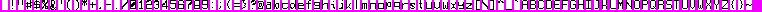
<style>
.page{position:relative;width:762px;height:12px;background:#f000ff}
.page>*{position:absolute;margin:0}
.t1{font:13px "VCROSDMono";color:#000000}
</style>
<div class="page">
<p class="t1" style="left:12px;top:0px;width:1px;height:9px">!</p>
<p class="t1" style="left:18px;top:0px;width:5px;height:5px">“</p>
<p class="t1" style="left:25px;top:0px;width:8px;height:9px">#</p>
<p class="t1" style="left:34px;top:0px;width:6px;height:9px">$</p>
<p class="t1" style="left:42px;top:0px;width:6px;height:9px">%</p>
<p class="t1" style="left:50px;top:0px;width:6px;height:10px">&amp;</p>
<p class="t1" style="left:67px;top:0px;width:3px;height:10px">(</p>
<p class="t1" style="left:76px;top:0px;width:3px;height:10px">)</p>
<p class="t1" style="left:82px;top:0px;width:5px;height:6px">*</p>
<p class="t1" style="left:89px;top:2px;width:7px;height:6px">+</p>
<p class="t1" style="left:122px;top:0px;width:6px;height:9px">/</p>
<p class="t1" style="left:130px;top:0px;width:6px;height:9px">0</p>
<p class="t1" style="left:139px;top:0px;width:4px;height:9px">1</p>
<p class="t1" style="left:146px;top:0px;width:6px;height:9px">2</p>
<p class="t1" style="left:154px;top:0px;width:5px;height:9px">3</p>
<p class="t1" style="left:162px;top:0px;width:6px;height:9px">4</p>
<p class="t1" style="left:170px;top:0px;width:6px;height:9px">5</p>
<p class="t1" style="left:178px;top:0px;width:6px;height:9px">6</p>
<p class="t1" style="left:186px;top:0px;width:6px;height:9px">7</p>
<p class="t1" style="left:194px;top:0px;width:6px;height:9px">8</p>
<p class="t1" style="left:202px;top:0px;width:6px;height:9px">9</p>
<p class="t1" style="left:212px;top:2px;width:1px;height:6px">:</p>
<p class="t1" style="left:219px;top:2px;width:2px;height:7px">;</p>
<p class="t1" style="left:227px;top:0px;width:3px;height:9px">&lt;</p>
<p class="t1" style="left:234px;top:3px;width:6px;height:4px">=</p>
<p class="t1" style="left:242px;top:0px;width:4px;height:9px">&gt;</p>
<p class="t1" style="left:251px;top:0px;width:5px;height:9px">?</p>
<p class="t1" style="left:257px;top:1px;width:7px;height:8px">@</p>
<p class="t1" style="left:266px;top:2px;width:5px;height:7px">a</p>
<p class="t1" style="left:274px;top:0px;width:5px;height:9px">b</p>
<p class="t1" style="left:282px;top:3px;width:6px;height:6px">c</p>
<p class="t1" style="left:290px;top:0px;width:6px;height:9px">d</p>
<p class="t1" style="left:298px;top:3px;width:6px;height:6px">e</p>
<p class="t1" style="left:306px;top:0px;width:5px;height:9px">f</p>
<p class="t1" style="left:314px;top:2px;width:6px;height:7px">g</p>
<p class="t1" style="left:322px;top:0px;width:6px;height:9px">h</p>
<p class="t1" style="left:331px;top:1px;width:4px;height:8px">i</p>
<p class="t1" style="left:339px;top:0px;width:4px;height:9px">j</p>
<p class="t1" style="left:346px;top:0px;width:5px;height:9px">k</p>
<p class="t1" style="left:362px;top:3px;width:5px;height:6px">m</p>
<p class="t1" style="left:370px;top:3px;width:6px;height:6px">n</p>
<p class="t1" style="left:378px;top:3px;width:6px;height:6px">o</p>
<p class="t1" style="left:386px;top:2px;width:5px;height:7px">p</p>
<p class="t1" style="left:394px;top:2px;width:6px;height:7px">q</p>
<p class="t1" style="left:402px;top:3px;width:6px;height:6px">r</p>
<p class="t1" style="left:410px;top:3px;width:5px;height:6px">s</p>
<p class="t1" style="left:419px;top:0px;width:3px;height:9px">t</p>
<p class="t1" style="left:426px;top:2px;width:6px;height:7px">u</p>
<p class="t1" style="left:434px;top:2px;width:6px;height:7px">v</p>
<p class="t1" style="left:443px;top:2px;width:5px;height:7px">w</p>
<p class="t1" style="left:451px;top:2px;width:6px;height:7px">x</p>
<p class="t1" style="left:458px;top:2px;width:6px;height:7px">y</p>
<p class="t1" style="left:466px;top:3px;width:6px;height:6px">z</p>
<p class="t1" style="left:476px;top:0px;width:4px;height:10px">[</p>
<p class="t1" style="left:482px;top:0px;width:6px;height:9px">\</p>
<p class="t1" style="left:490px;top:0px;width:4px;height:10px">]</p>
<p class="t1" style="left:498px;top:0px;width:6px;height:3px">^</p>
<p class="t1" style="left:515px;top:0px;width:3px;height:2px">`</p>
<p class="t1" style="left:746px;top:4px;width:6px;height:2px">~</p>
<p class="t1" style="left:99px;top:7px;width:2px;height:2px">,</p>
</div>
